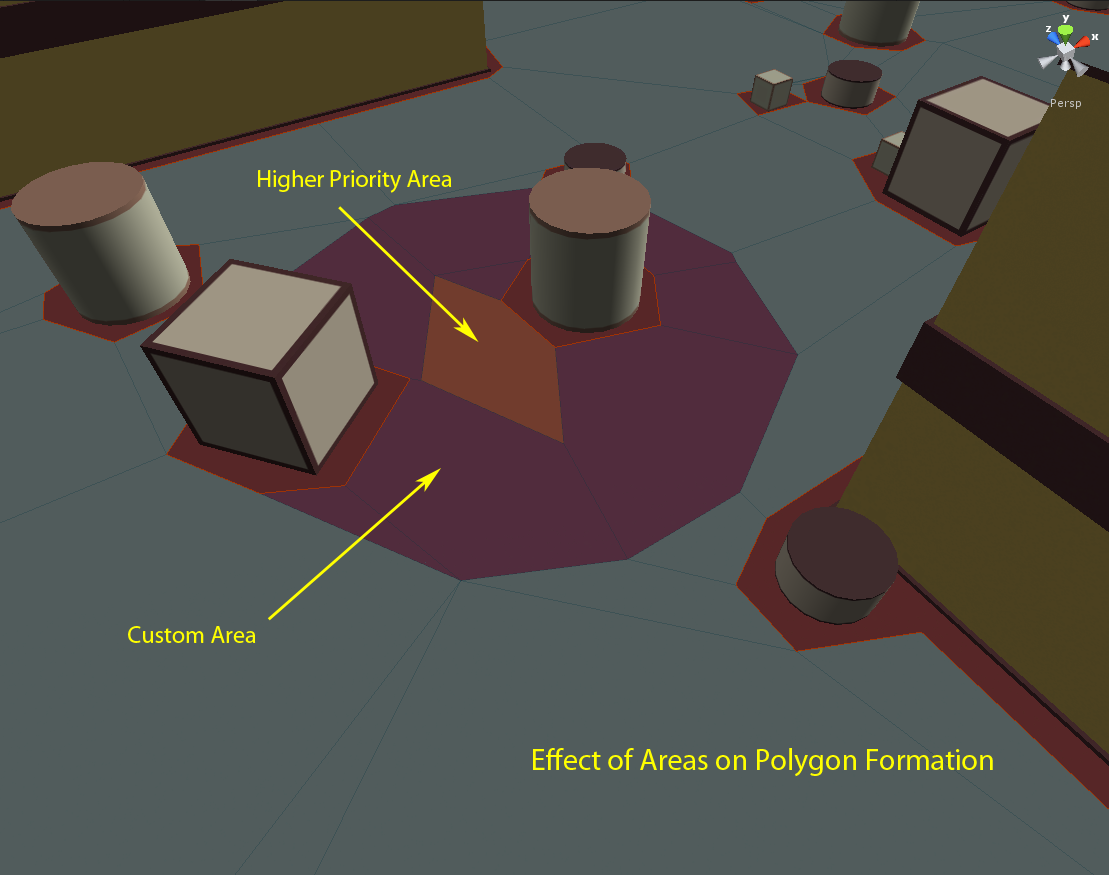
<style>
.page{position:relative;width:1109px;height:875px;background:#515c5c}
.page>*{position:absolute;margin:0}
.t1{font:24px "MyriadPro-Regular";color:#ffff00}
.t2{font:30px "MyriadPro-Regular";color:#ffff00}
</style>
<div class="page">
<p class="t1" style="left:258px;top:170px;width:194px;height:23px">Higher Priority Area</p>
<p class="t1" style="left:128px;top:626px;width:128px;height:17px">Custom Area</p>
<p class="t2" style="left:533px;top:748px;width:460px;height:29px">Effect of Areas on Polygon Formation</p>
</div>
